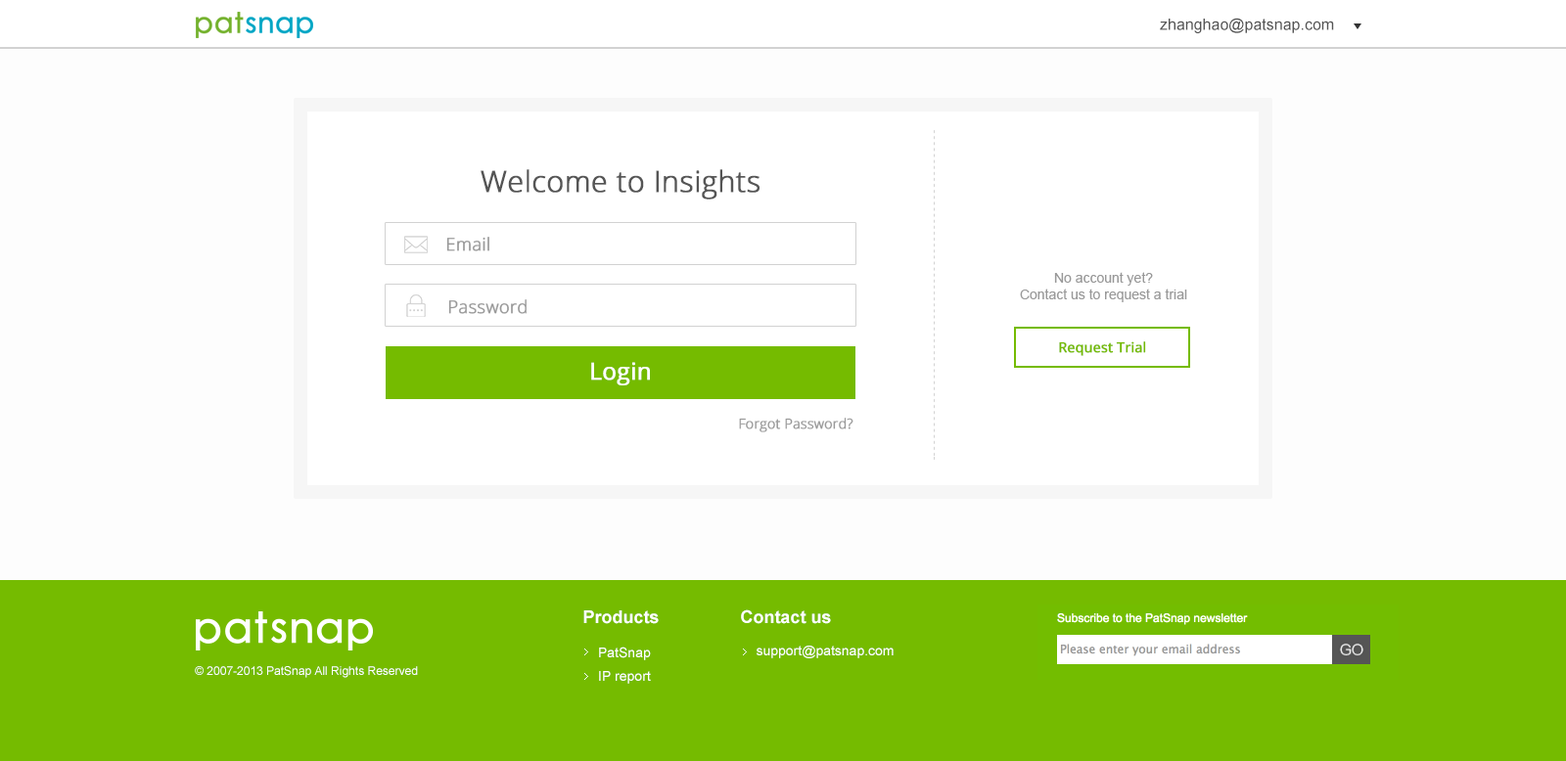
<style>
.page{position:relative;width:1566px;height:761px;background:#fdfdfd}
.page>*{position:absolute;margin:0}
.t1{font:15.7px "ArialMT";color:#555555}
.t2{font:29.4px "OpenSans-Light";color:#555555;font-weight:bold}
.t3{font:17.6px "OpenSans-Light";color:#999999;font-weight:bold}
.t4{font:13.7px "ArialMT";color:#999999}
.t5{font:13.7px "OpenSans";color:#75bb00;font-weight:bold}
.t6{font:23.5px "OpenSans";color:#ffffff;font-weight:bold}
.t7{font:13.7px "OpenSans-Light";color:#999999;font-weight:bold}
.t8{font:17.6px "Arial-BoldMT";color:#ffffff}
.t9{font:13.7px/3.9px "ArialMT";color:#ffffff}
.t10{font:13.7px "ArialMT";color:#ffffff}
.t11{font:11.7px "ArialMT";color:#ffffff}
</style>
<div class="page">
<p class="t1" style="left:1160px;top:18px;width:174px;height:15px">zhanghao@patsnap.com</p>
<p class="t2" style="left:481px;top:169px;width:279px;height:31px">Welcome to Insights</p>
<p class="t3" style="left:446px;top:237px;width:43px;height:15px">Email</p>
<p class="t4" style="left:1020px;top:272px;width:167px;height:30px;text-align:center">No account yet?<br>Contact us to request a trial</p>
<p class="t3" style="left:448px;top:299px;width:79px;height:15px">Password</p>
<p class="t5" style="left:1059px;top:342px;width:87px;height:14px">Request Trial</p>
<p class="t6" style="left:591px;top:362px;width:59px;height:24px">Login</p>
<p class="t7" style="left:739px;top:418px;width:114px;height:15px">Forgot Password?</p>
<p class="t8" style="left:583px;top:611px;width:76px;height:13px">Products</p>
<p class="t8" style="left:741px;top:610px;width:90px;height:14px">Contact us</p>
<p class="t9" style="left:599px;top:647px;width:52px;height:37px">PatSnap    <br>IP report</p>
<p class="t10" style="left:757px;top:646px;width:137px;height:13px">support@patsnap.com</p>
<p class="t11" style="left:195px;top:667px;width:223px;height:11px">© 2007-2013 PatSnap All Rights Reserved</p>
</div>
